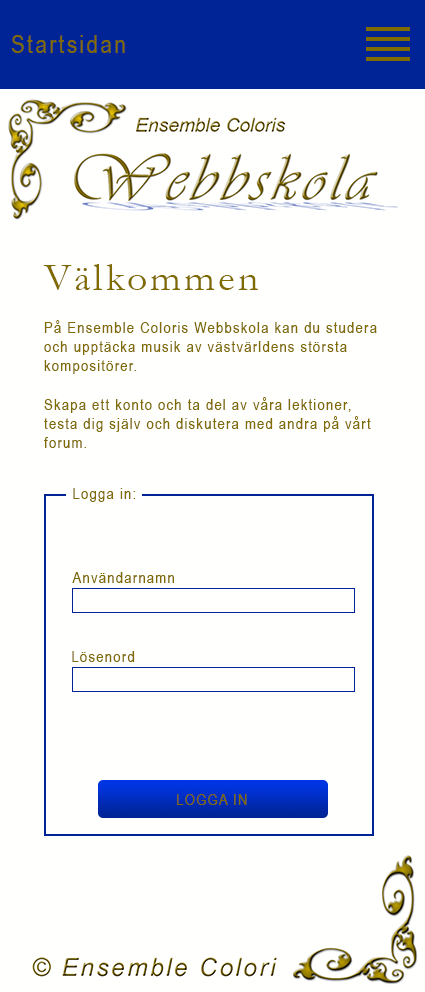
<style>
.page{position:relative;width:425px;height:992px;background:#fffffe}
.page>*{position:absolute;margin:0}
.t1{font:25px "ArialNarrow";letter-spacing:0.1em;color:#7f6b00}
.t2{font:16px "ArialNarrow";letter-spacing:0.075em;color:#7f6b00}
.t3{font:40px "Garamond";letter-spacing:0.075em;color:#7f6b00}
</style>
<div class="page">
<p class="t1" style="left:11px;top:35px;width:114px;height:18px">Startsidan</p>
<p class="t2" style="left:43px;top:264px;width:334px;height:184px"><span class="t3">Välkommen<br><br></span>På Ensemble Coloris Webbskola kan du studera och upptäcka musik av västvärldens största kompositörer.<br><br>Skapa ett konto och ta del av våra lektioner, testa dig själv och diskutera med andra på vårt forum.</p>
<p class="t2" style="left:73px;top:488px;width:63px;height:14px">Logga in:</p>
<p class="t2" style="left:72px;top:572px;width:102px;height:11px">Användarnamn</p>
<p class="t2" style="left:72px;top:651px;width:63px;height:11px">Lösenord</p>
<p class="t2" style="left:177px;top:794px;width:70px;height:11px">LOGGA IN</p>
</div>
